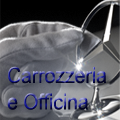
<style>
.page{position:relative;width:120px;height:120px}
.page>*{position:absolute;margin:0}
.t1{font:22px "ArialMT";scale:0.88 1}
</style>
<div class="page">
<p class="t1" style="left:7px;top:66px;width:100px;height:44px">Carrozzeria <br>e Officina</p>
</div>
